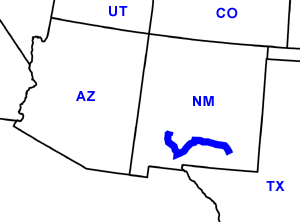
<style>
.page{position:relative;width:300px;height:222px;background:#ffffff}
.page>*{position:absolute;margin:0}
.t1{font:14px "Arial-BoldMT";letter-spacing:0.05em;color:#0000ff}
</style>
<div class="page">
<p class="t1" style="left:109px;top:6px;width:19px;height:11px">UT</p>
<p class="t1" style="left:216px;top:7px;width:22px;height:12px">CO</p>
<p class="t1" style="left:76px;top:91px;width:19px;height:10px">AZ</p>
<p class="t1" style="left:193px;top:96px;width:21px;height:10px">NM</p>
<p class="t1" style="left:266px;top:181px;width:19px;height:10px">TX</p>
</div>
